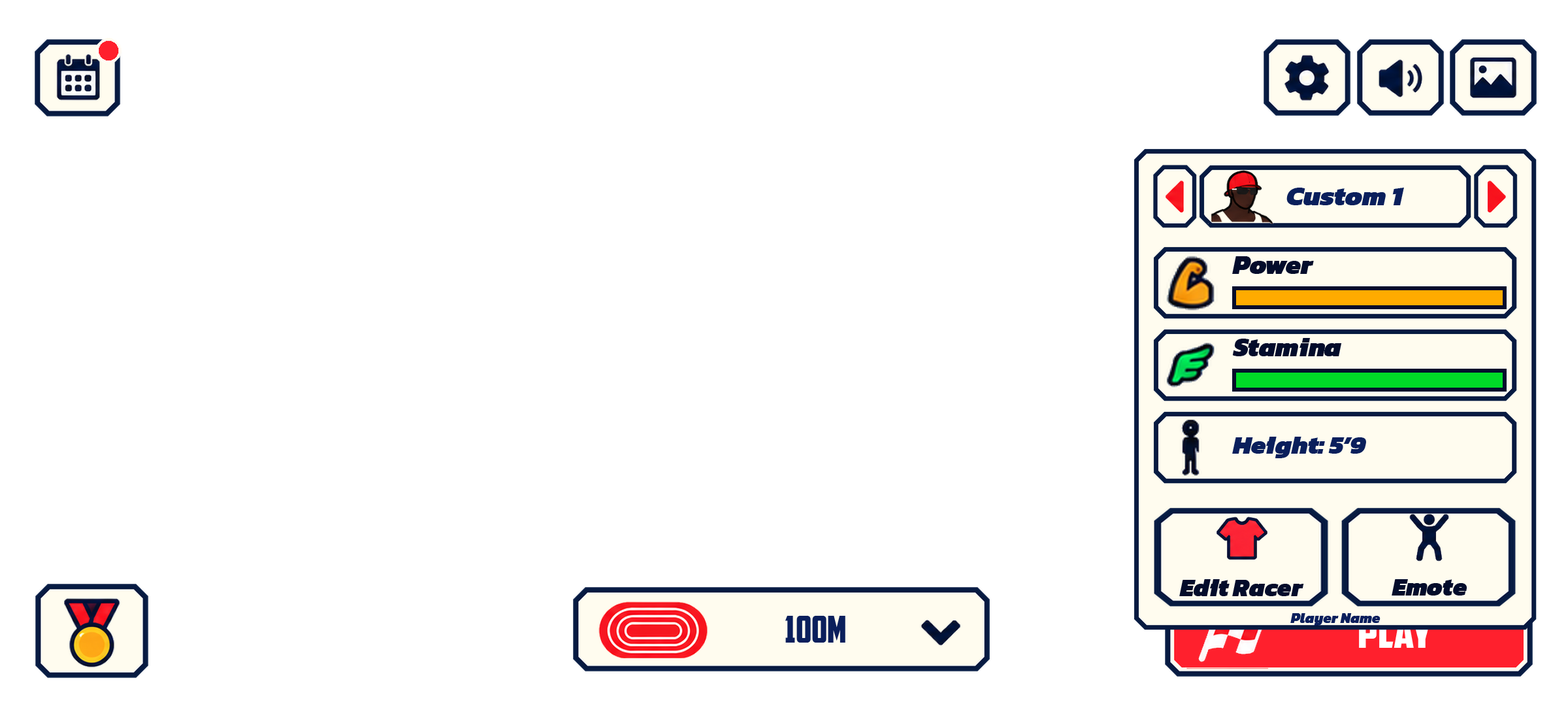
<style>
.page{position:relative;width:1568px;height:706px;background:#ffffff}
.page>*{position:absolute;margin:0}
.t1{font:27.4px "Kanit-BlackItalic";color:#0a1f5c}
.t2{font:26.7px "Kanit-BlackItalic";color:#030c2b}
.t3{font:26.1px "Kanit-BlackItalic";color:#0a1f5c}
.t4{font:24.8px "Kanit-BlackItalic";color:#030c2b}
.t5{font:36.6px "AmericanCaptain";color:#0a1f5c}
.t6{font:14.4px "Kanit-BlackItalic";color:#0a1f5c}
.t7{font:47px "AmericanCaptain";color:#ffffff}
</style>
<div class="page">
<p class="t1" style="left:1286px;top:188px;width:118px;height:17px">Custom 1</p>
<p class="t2" style="left:1232px;top:256px;width:82px;height:18px">Power</p>
<p class="t2" style="left:1232px;top:338px;width:110px;height:18px">Stamina</p>
<p class="t3" style="left:1232px;top:436px;width:134px;height:22px">Height: 5’9</p>
<p class="t4" style="left:1179px;top:579px;width:125px;height:17px">Edit Racer</p>
<p class="t4" style="left:1392px;top:579px;width:75px;height:16px">Emote</p>
<p class="t5" style="left:785px;top:615px;width:60px;height:27px">100m</p>
<p class="t6" style="left:1290px;top:613px;width:90px;height:12px">Player Name</p>
<p class="t7" style="left:1359px;top:613px;width:73px;height:34px">Play</p>
</div>
